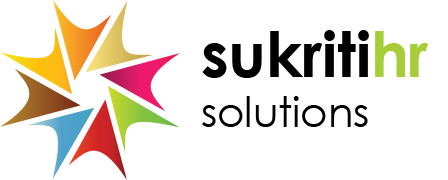
<style>
.page{position:relative;width:448px;height:180px;background:#ffffff}
.page>*{position:absolute;margin:0}
.t1{font:41.7px "CenturyGothic";color:#000000}
.t2{font:62.5px "CenturyGothic-Bold";color:#000000}
.t3{font:62.5px "CenturyGothic-Bold";color:#a7ce38}
</style>
<div class="page">
<p class="t1" style="left:202px;top:30px;width:226px;height:97px"><span class="t2">sukriti</span><span class="t3">hr<br></span>solutions</p>
</div>
